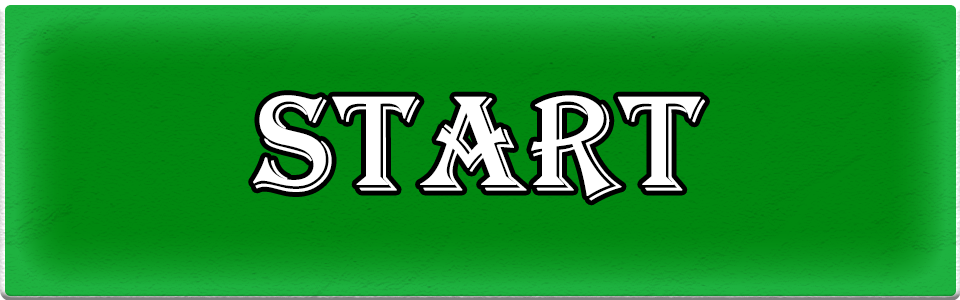
<style>
.page{position:relative;width:960px;height:300px}
.page>*{position:absolute;margin:0}
.t1{font:139.2px "Algerian";color:#ffffff;font-weight:bold}
</style>
<div class="page">
<p class="t1" style="left:253px;top:95px;width:452px;height:106px">START</p>
</div>
